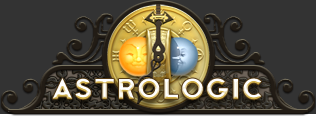
<style>
.page{position:relative;width:316px;height:116px;background:#333333}
.page>*{position:absolute;margin:0}
.t1{font:36px "Cityof"}
</style>
<div class="page">
<p class="t1" style="left:52px;top:78px;width:209px;height:22px">astrologic</p>
</div>
